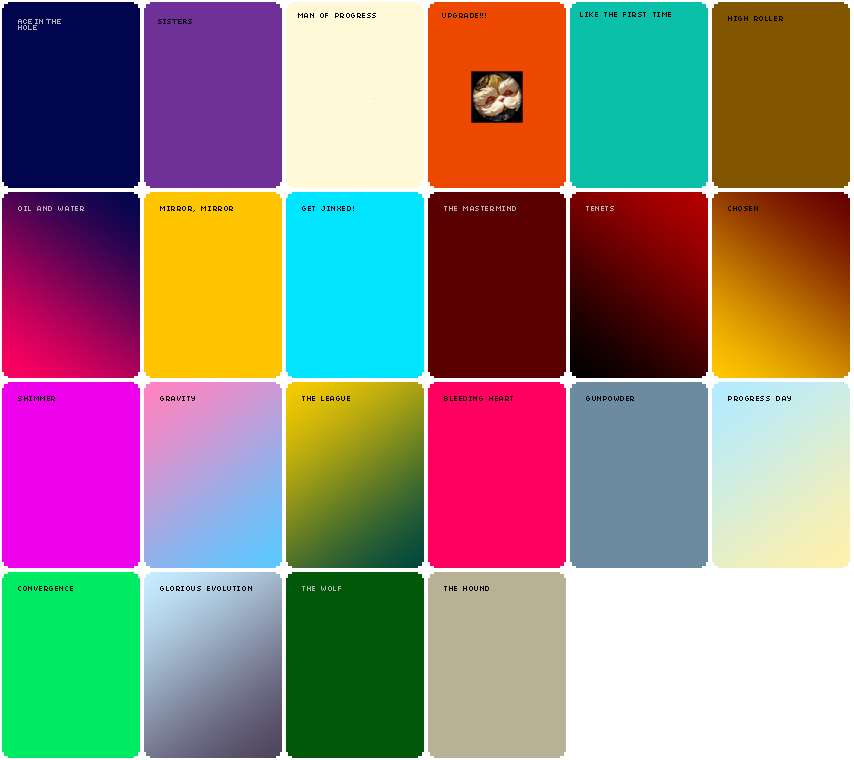
<style>
.page{position:relative;width:854px;height:760px}
.page>*{position:absolute;margin:0}
.t1{font:8px "04b03";letter-spacing:0.07em;color:#000000}
.t2{font:8px "04b03";letter-spacing:0.07em;color:#b4b4b4}
</style>
<div class="page">
<p class="t1" style="left:728px;top:16px;width:55px;height:5px">HIGH ROLLER</p>
<p class="t2" style="left:18px;top:206px;width:66px;height:5px">OIL AND WATER</p>
<p class="t1" style="left:160px;top:206px;width:73px;height:6px">MIRROR, MIRROR</p>
<p class="t1" style="left:302px;top:206px;width:52px;height:5px">GET JINXED!</p>
<p class="t2" style="left:444px;top:206px;width:72px;height:5px">THE MASTERMIND</p>
<p class="t2" style="left:586px;top:206px;width:28px;height:5px">TENETS</p>
<p class="t1" style="left:728px;top:206px;width:30px;height:5px">CHOSEN</p>
<p class="t1" style="left:18px;top:396px;width:37px;height:5px">SHIMMER</p>
<p class="t1" style="left:160px;top:396px;width:35px;height:5px">GRAVITY</p>
<p class="t1" style="left:302px;top:396px;width:48px;height:5px">THE LEAGUE</p>
<p class="t1" style="left:444px;top:396px;width:69px;height:5px">BLEEDING HEART</p>
<p class="t1" style="left:586px;top:396px;width:48px;height:5px">GUNPOWDER</p>
<p class="t1" style="left:728px;top:396px;width:63px;height:5px">PROGRESS DAY</p>
<p class="t1" style="left:18px;top:586px;width:55px;height:5px">CONVERGENCE</p>
<p class="t1" style="left:160px;top:586px;width:92px;height:5px">GLORIOUS EVOLUTION</p>
<p class="t2" style="left:302px;top:586px;width:39px;height:5px">THE WOLF</p>
<p class="t1" style="left:444px;top:586px;width:45px;height:5px">THE HOUND</p>
</div>
